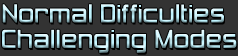
<style>
.page{position:relative;width:238px;height:56px;background:#333333}
.page>*{position:absolute;margin:0}
.t1{font:24px "ZeroThrees"}
</style>
<div class="page">
<p class="t1" style="left:2px;top:4px;width:222px;height:19px">Normal Difficulties</p>
<p class="t1" style="left:2px;top:29px;width:235px;height:24px">Challenging Modes</p>
</div>
